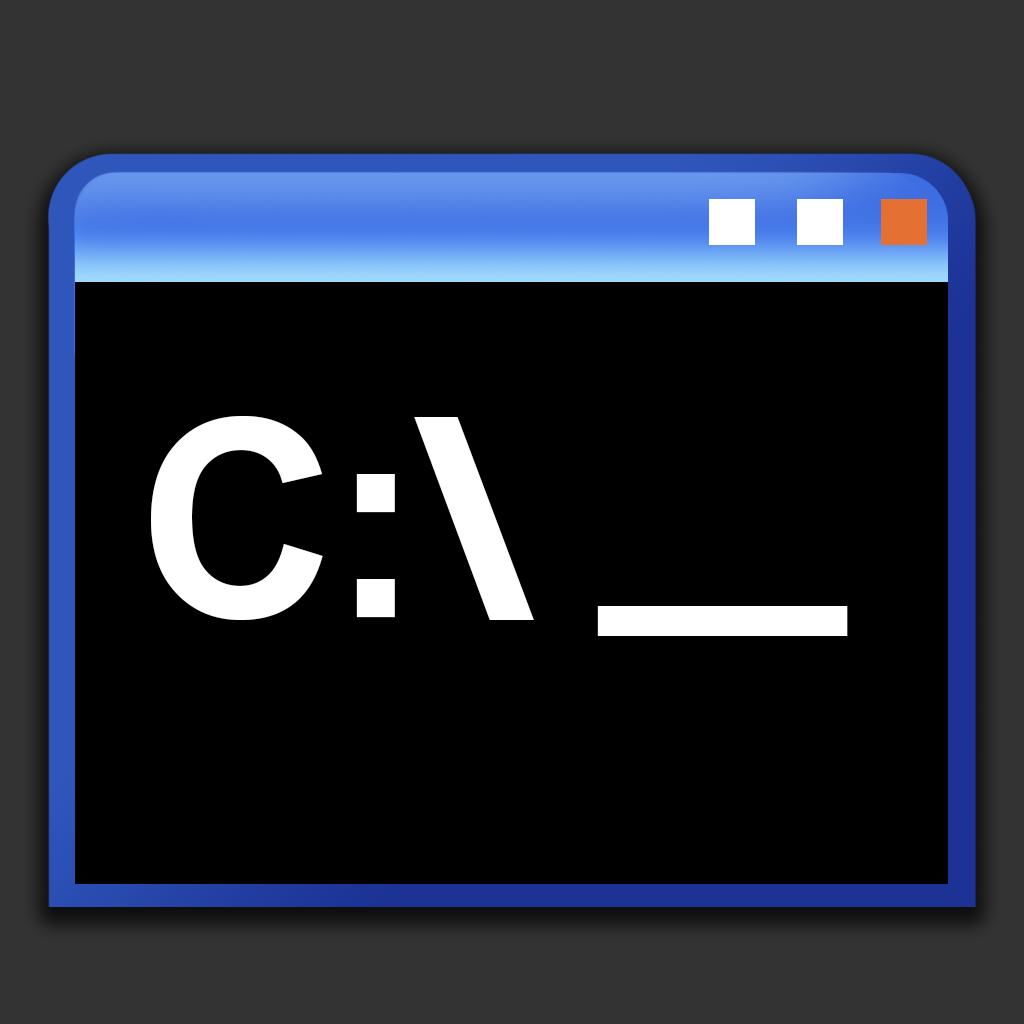
<style>
.page{position:relative;width:1024px;height:1024px;background:#000000}
.page>*{position:absolute;margin:0}
.t1{font:275px "Arial-BoldMT";letter-spacing:-0.025em;color:#ffffff}
.t2{font:275px "Arial-BoldMT";letter-spacing:-0.025em;color:#ffffff;scale:1.55 1}
.t3{font:333.3px "Arial-BoldMT";letter-spacing:-0.025em;color:#ffffff;scale:1.31 1}
</style>
<div class="page">
<p class="t1" style="left:151px;top:416px;width:383px;height:204px">C:<span class="t2">\</span></p>
<p class="t3" style="left:597px;top:606px;width:251px;height:30px">_</p>
</div>
